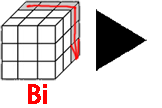
<style>
.page{position:relative;width:162px;height:108px;background:#ffffff}
.page>*{position:absolute;margin:0}
.t1{font:27px "MyriadPro-Regular";color:#ff0000;font-weight:bold}
</style>
<div class="page">
<p class="t1" style="left:28px;top:84px;width:19px;height:20px">Bi</p>
</div>
